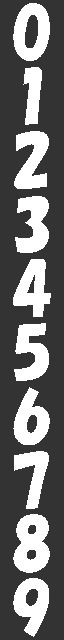
<style>
.page{position:relative;width:64px;height:640px;background:#333333}
.page>*{position:absolute;margin:0}
.t1{font:64px/64px "HGPSoeiKakupoptai";color:#ffffff}
</style>
<div class="page">
<p class="t1" style="left:13px;top:3px;width:38px;height:634px;text-align:center">0<br>1<br>2<br>3<br>4<br>5<br>6<br>7<br>8<br>9</p>
</div>
